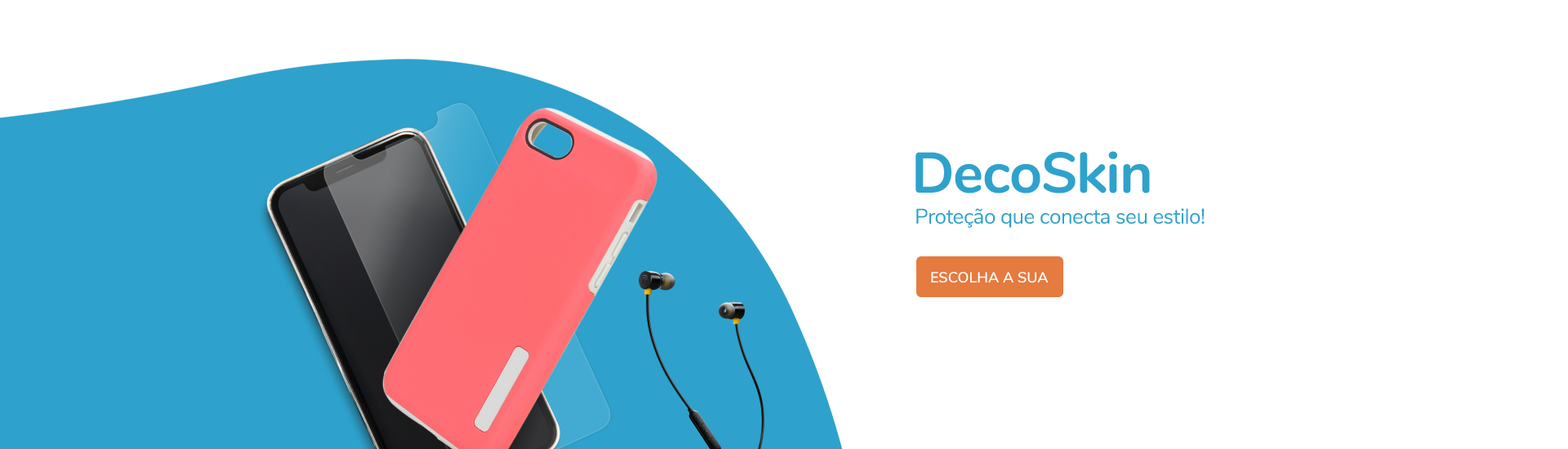
<style>
.page{position:relative;width:1568px;height:449px;background:#ffffff}
.page>*{position:absolute;margin:0}
.t1{font:57.2px "Nunito-Bold";letter-spacing:-0.02em;color:#2ea2cc}
.t2{font:21.2px "Nunito-Regular";letter-spacing:-0.02em;color:#2ea2cc}
.t3{font:14.7px "Nunito-SemiBold";color:#ffffff}
</style>
<div class="page">
<p class="t1" style="left:915px;top:151px;width:235px;height:43px">DecoSkin</p>
<p class="t2" style="left:916px;top:208px;width:289px;height:20px">Proteção que conecta seu estilo!</p>
<p class="t3" style="left:931px;top:272px;width:117px;height:11px">ESCOLHA A SUA</p>
</div>
